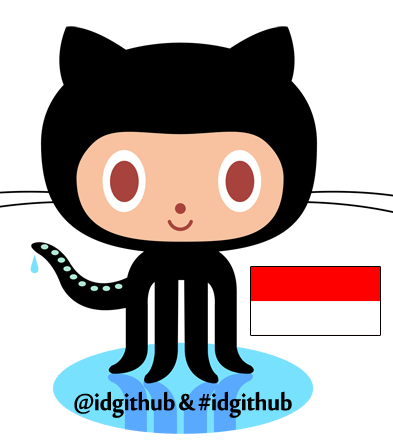
<style>
.page{position:relative;width:393px;height:444px;background:#ffffff}
.page>*{position:absolute;margin:0}
.t1{font:36px "MoolBoran";letter-spacing:-0.02em;color:#000000}
</style>
<div class="page">
<p class="t1" style="left:74px;top:391px;width:218px;height:27px">@idgithub &amp; #idgithub</p>
</div>
